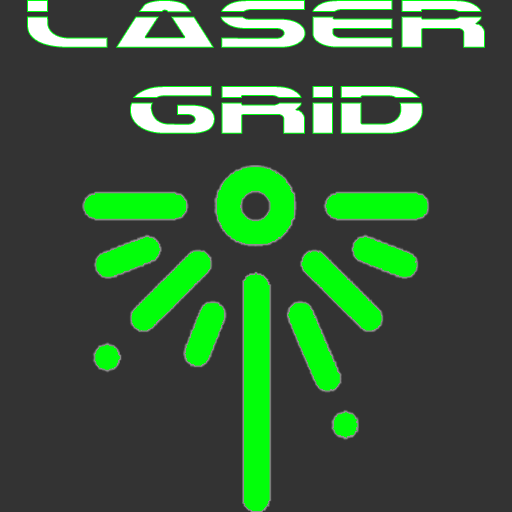
<style>
.page{position:relative;width:512px;height:512px;background:#333333}
.page>*{position:absolute;margin:0}
.t1{font:72px "Laserian";color:#ffffff}
</style>
<div class="page">
<p class="t1" style="left:27px;top:0px;width:458px;height:134px;text-align:center">LASer<br> Grid</p>
</div>
